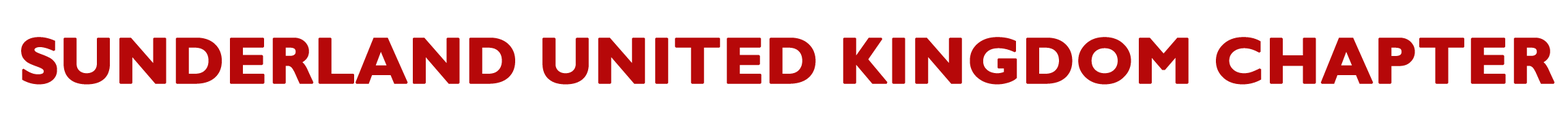
<style>
.page{position:relative;width:1568px;height:127px;background:#ffffff}
.page>*{position:absolute;margin:0}
.t1{font:64.8px "GillSansMT-Bold";color:#b60809;font-weight:bold}
</style>
<div class="page">
<p class="t1" style="left:21px;top:37px;width:1534px;height:48px">SUNDERLAND UNITED KINGDOM CHAPTER</p>
</div>
